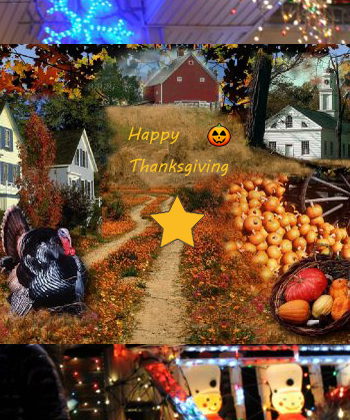
<style>
.page{position:relative;width:350px;height:420px}
.page>*{position:absolute;margin:0}
.t1{font:18px "MVBoli";color:#f8c21d}
</style>
<div class="page">
<p class="t1" style="left:128px;top:126px;width:101px;height:50px">Happy <br>Thanksgiving</p>
</div>
